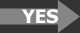
<style>
.page{position:relative;width:80px;height:33px;background:#333333}
.page>*{position:absolute;margin:0}
.t1{font:18.5px "Tahoma-Bold";color:#ffffff}
</style>
<div class="page">
<p class="t1" style="left:22px;top:9px;width:36px;height:15px">YES</p>
</div>
